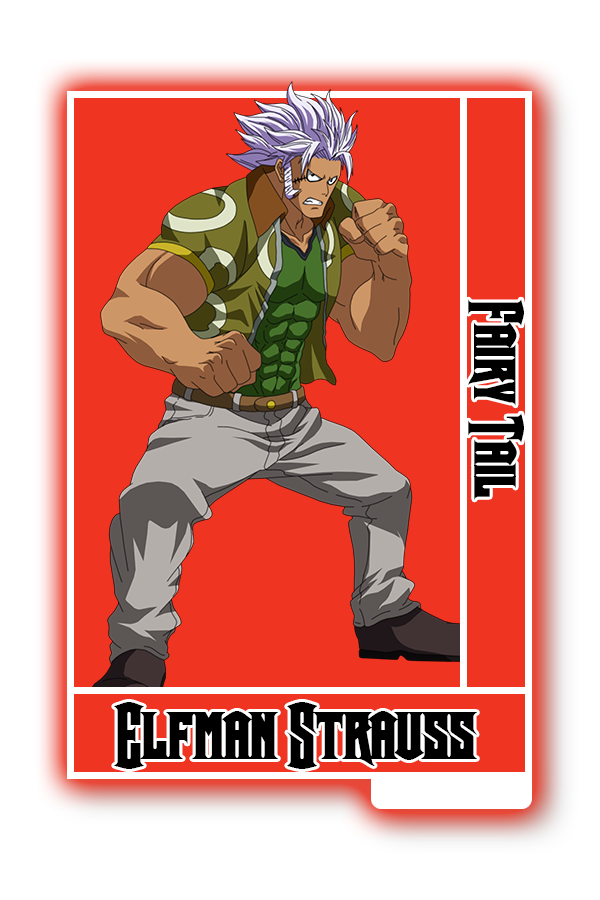
<style>
.page{position:relative;width:600px;height:900px;background:#ef3422}
.page>*{position:absolute;margin:0}
.t1{font:61.5px "Crown-Title";color:#000000}
.t2{font:70.1px "Crown-Title";color:#000000}
</style>
<div class="page">
<p class="t1" style="left:468px;top:299px;width:56px;height:201px;rotate:90deg">Fairy Tail</p>
<p class="t2" style="left:114px;top:702px;width:363px;height:67px">Elfman Strauss</p>
</div>
